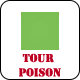
<style>
.page{position:relative;width:80px;height:80px;background:#ffffff}
.page>*{position:absolute;margin:0}
.t1{font:12px "Stencil";color:#bd0022}
</style>
<div class="page">
<p class="t1" style="left:19px;top:53px;width:42px;height:24px;text-align:center">Tour <br>POISON</p>
</div>
